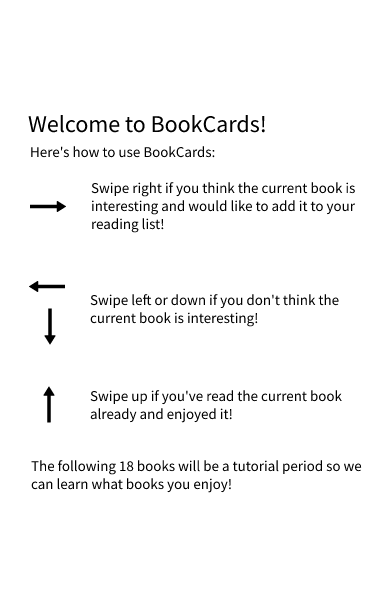
<style>
.page{position:relative;width:390px;height:609px;background:#ffffff}
.page>*{position:absolute;margin:0}
.t1{font:24px "SourceSansPro-Regular";color:#000000}
.t2{font:15px "SourceSansPro-Regular";color:#000000}
</style>
<div class="page">
<p class="t1" style="left:28px;top:115px;width:237px;height:18px">Welcome to BookCards!</p>
<p class="t2" style="left:31px;top:146px;width:184px;height:12px">Here's how to use BookCards:</p>
<p class="t2" style="left:91px;top:182px;width:264px;height:51px">Swipe right if you think the current book is interesting and would like to add it to your reading list!</p>
<p class="t2" style="left:90px;top:294px;width:249px;height:33px">Swipe left or down if you don't think the current book is interesting!</p>
<p class="t2" style="left:90px;top:390px;width:252px;height:33px">Swipe up if you've read the current book already and enjoyed it!</p>
<p class="t2" style="left:31px;top:460px;width:331px;height:33px">The following 18 books will be a tutorial period so we can learn what books you enjoy!</p>
</div>
